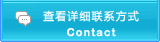
<style>
.page{position:relative;width:160px;height:42px}
.page>*{position:absolute;margin:0}
.t1{font:11px/16px "MicrosoftYaHei";letter-spacing:0.1em;color:#ffffff}
.t2{font:11px/16px "ArialRoundedMTBold";letter-spacing:0.1em;color:#ffffff}
</style>
<div class="page">
<p class="t1" style="left:43px;top:10px;width:96px;height:27px;text-align:center">查看详细联系方式<br><span class="t2">Contact</span></p>
</div>
